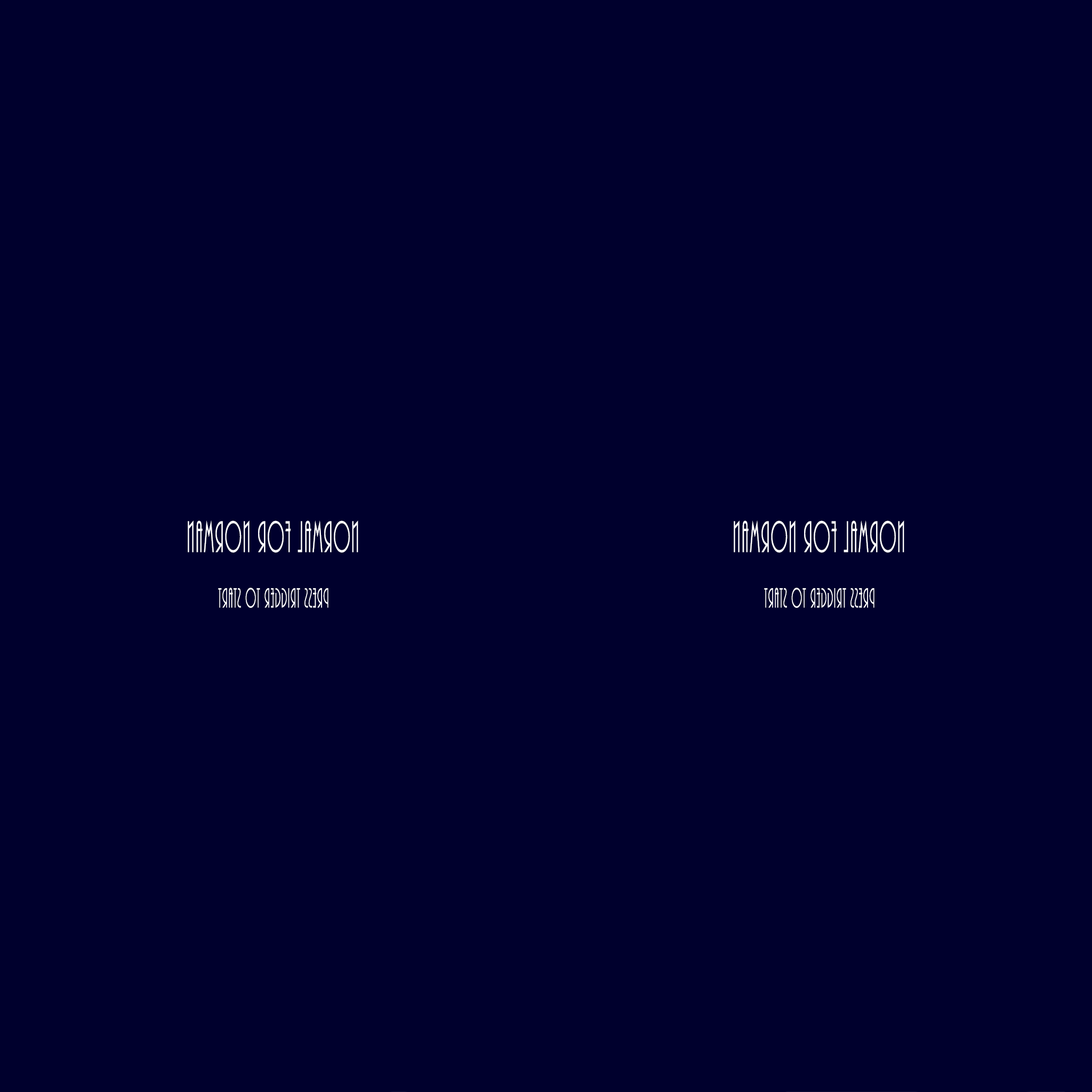
<style>
.page{position:relative;width:1092px;height:1092px;background:#00002d}
.page>*{position:absolute;margin:0}
.t1{font:46.1px "ARBONNIE";letter-spacing:0.05em;color:#ffffff;scale:0.5 1}
.t2{font:29px "ARBONNIE";letter-spacing:0.05em;color:#ffffff;scale:0.5 1}
</style>
<div class="page">
<p class="t1" style="left:188px;top:520px;width:170px;height:33px;rotate:180deg">NORMAL FOR NORMAN</p>
<p class="t1" style="left:734px;top:520px;width:170px;height:33px;rotate:180deg">NORMAL FOR NORMAN</p>
<p class="t2" style="left:218px;top:588px;width:110px;height:20px;rotate:180deg">Press trigger to start</p>
<p class="t2" style="left:764px;top:588px;width:110px;height:20px;rotate:180deg">Press trigger to start</p>
</div>
